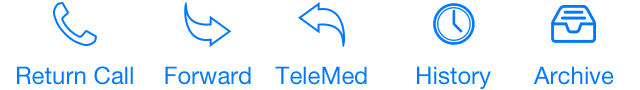
<style>
.page{position:relative;width:640px;height:90px;background:#ffffff}
.page>*{position:absolute;margin:0}
.t1{font:24px "HelveticaNeueLTPro-Roman";color:#0079ff}
</style>
<div class="page">
<p class="t1" style="left:17px;top:66px;width:116px;height:19px">Return Call</p>
<p class="t1" style="left:165px;top:66px;width:86px;height:19px">Forward</p>
<p class="t1" style="left:275px;top:66px;width:92px;height:19px">TeleMed</p>
<p class="t1" style="left:417px;top:66px;width:74px;height:23px">History</p>
<p class="t1" style="left:533px;top:66px;width:81px;height:19px">Archive</p>
</div>
